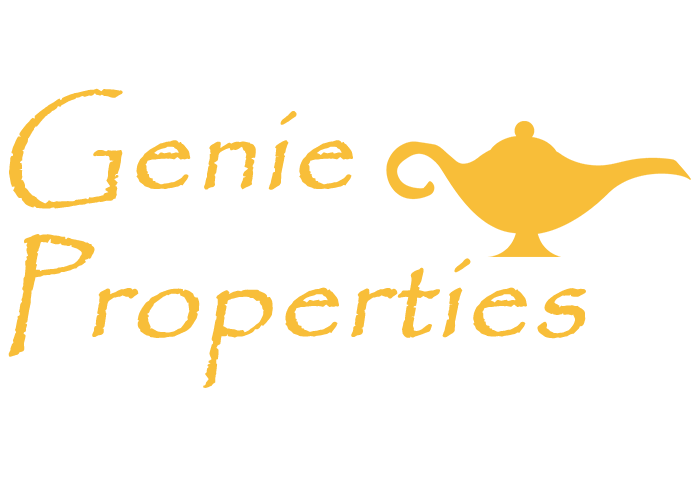
<style>
.page{position:relative;width:700px;height:500px;background:#ffffff}
.page>*{position:absolute;margin:0}
.t1{font:122.9px "Papyrus-Regular";color:#f8be39;font-weight:bold;font-style:italic}
</style>
<div class="page">
<p class="t1" style="left:8px;top:88px;width:578px;height:300px">Genie<br>Properties</p>
</div>
